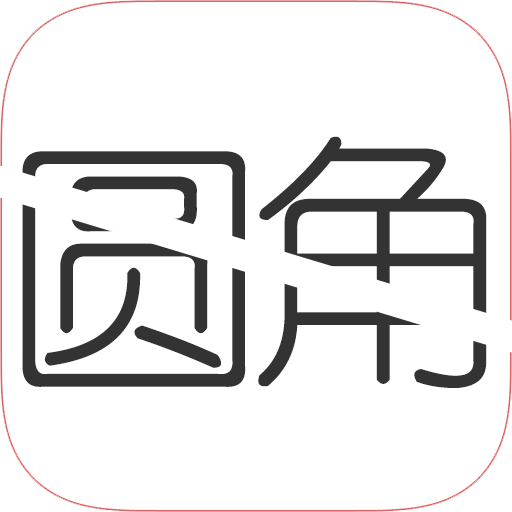
<style>
.page{position:relative;width:512px;height:512px;background:#ffffff}
.page>*{position:absolute;margin:0}
.t1{font:268.9px "YouYuan";color:#333333}
</style>
<div class="page">
<p class="t1" style="left:258px;top:136px;width:229px;height:252px">角</p>
<p class="t1" style="left:22px;top:151px;width:224px;height:236px">圆</p>
</div>
